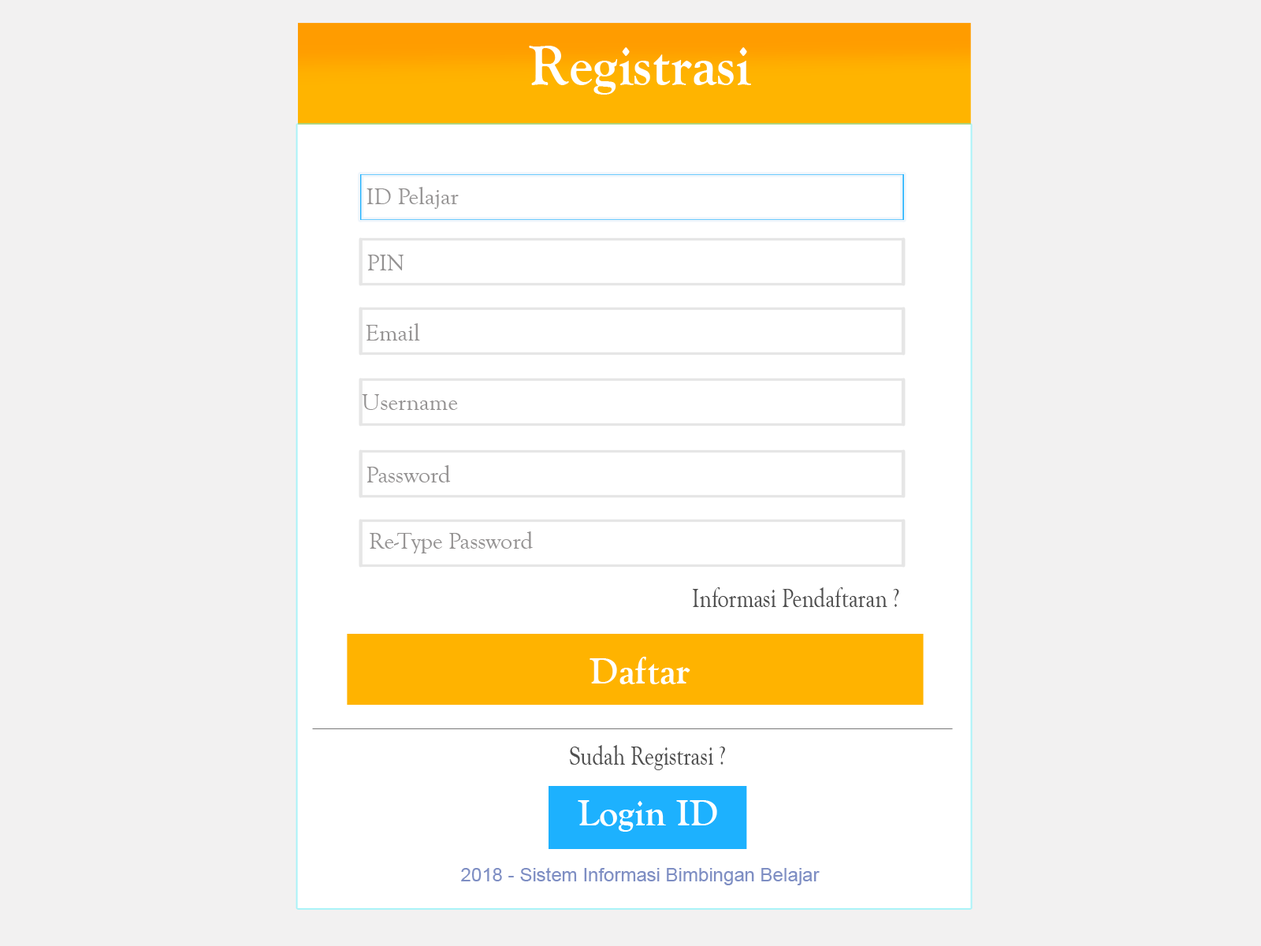
<style>
.page{position:relative;width:1261px;height:946px;background:#f2f1f1}
.page>*{position:absolute;margin:0}
.t1{font:56.7px "GoudyOldStyleT-Bold";color:#ffffff}
.t2{font:23.6px "GoudyOldStyleT-Regular";color:#949292}
.t3{font:27.8px "GoudyOldStyleT-Regular";color:#4e4e4e;scale:0.79 1}
.t4{font:37.8px "GoudyOldStyleT-Bold";color:#ffffff}
.t5{font:18.9px "ArialMT";color:#7e8ec3}
</style>
<div class="page">
<p class="t1" style="left:529px;top:46px;width:222px;height:49px">Registrasi</p>
<p class="t2" style="left:366px;top:187px;width:93px;height:22px">ID Pelajar</p>
<p class="t2" style="left:367px;top:255px;width:36px;height:15px">PIN</p>
<p class="t2" style="left:366px;top:323px;width:54px;height:17px">Email</p>
<p class="t2" style="left:362px;top:394px;width:96px;height:16px">Username</p>
<p class="t2" style="left:366px;top:465px;width:85px;height:17px">Password</p>
<p class="t2" style="left:370px;top:531px;width:163px;height:22px">Re-Type Password</p>
<p class="t3" style="left:693px;top:587px;width:206px;height:20px">Informasi Pendaftaran ?</p>
<p class="t4" style="left:589px;top:656px;width:101px;height:28px">Daftar</p>
<p class="t3" style="left:570px;top:745px;width:155px;height:25px">Sudah Registrasi ?</p>
<p class="t4" style="left:578px;top:800px;width:139px;height:31px">Login ID</p>
<p class="t5" style="left:461px;top:867px;width:359px;height:18px">2018 - Sistem Informasi Bimbingan Belajar</p>
</div>
